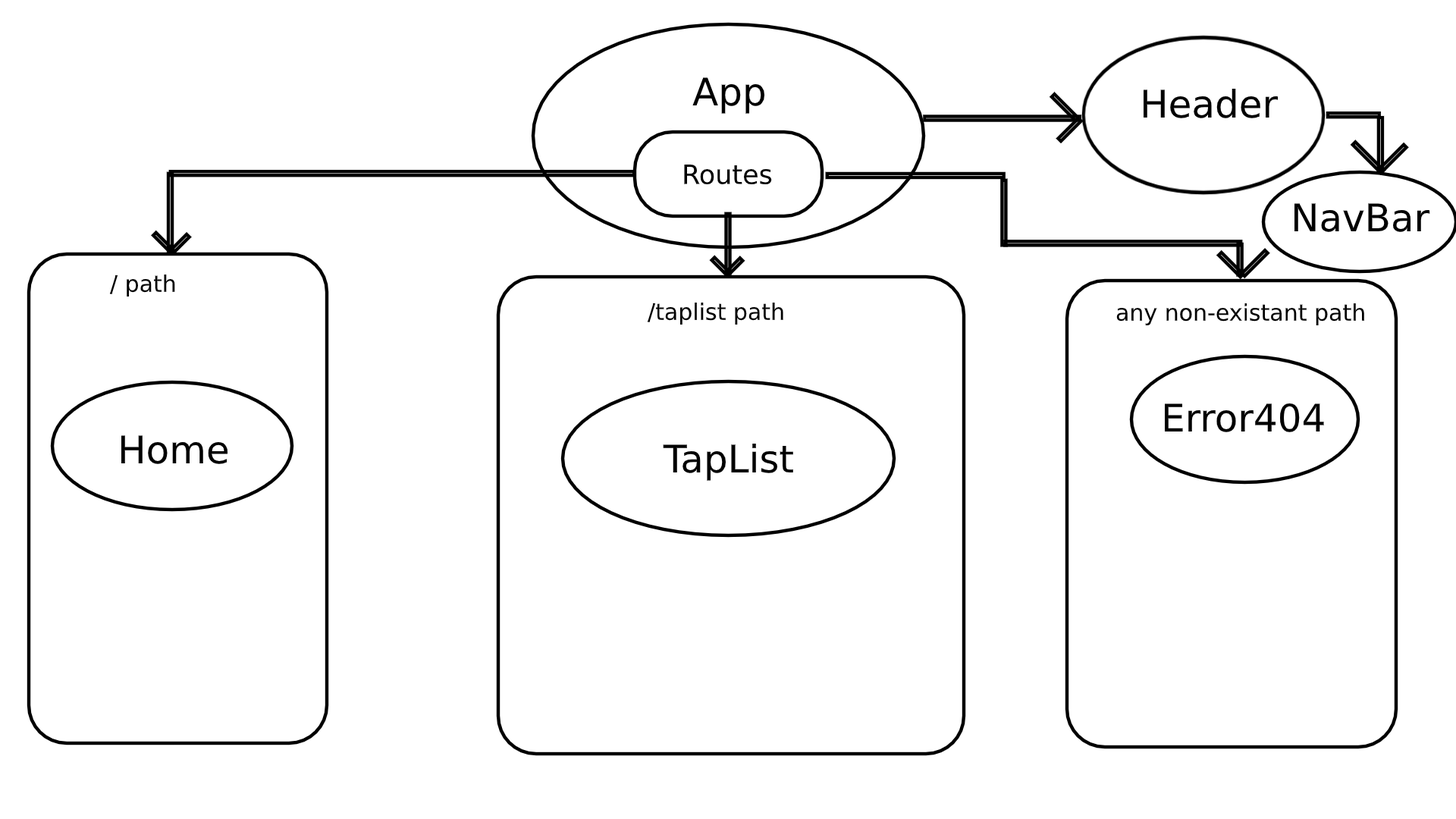
<style>
.page{position:relative;width:1456px;height:819px;background:#ffffff}
.page>*{position:absolute;margin:0}
.t1{font:37.9px "DejaVuSans";color:#000000}
.t2{font:26.5px "DejaVuSans";color:#000000}
.t3{font:22.7px "DejaVuSans";color:#000000}
</style>
<div class="page">
<p class="t1" style="left:692px;top:77px;width:72px;height:37px">App</p>
<p class="t1" style="left:1143px;top:89px;width:136px;height:29px">Header</p>
<p class="t2" style="left:684px;top:165px;width:88px;height:20px">Routes</p>
<p class="t1" style="left:1294px;top:203px;width:136px;height:29px">NavBar</p>
<p class="t3" style="left:110px;top:275px;width:65px;height:22px">/ path</p>
<p class="t3" style="left:648px;top:303px;width:135px;height:22px">/taplist path</p>
<p class="t3" style="left:1116px;top:303px;width:248px;height:23px">any non-existant path</p>
<p class="t1" style="left:1164px;top:403px;width:160px;height:29px">Error404</p>
<p class="t1" style="left:121px;top:435px;width:106px;height:29px">Home</p>
<p class="t1" style="left:663px;top:444px;width:130px;height:37px">TapList</p>
</div>
